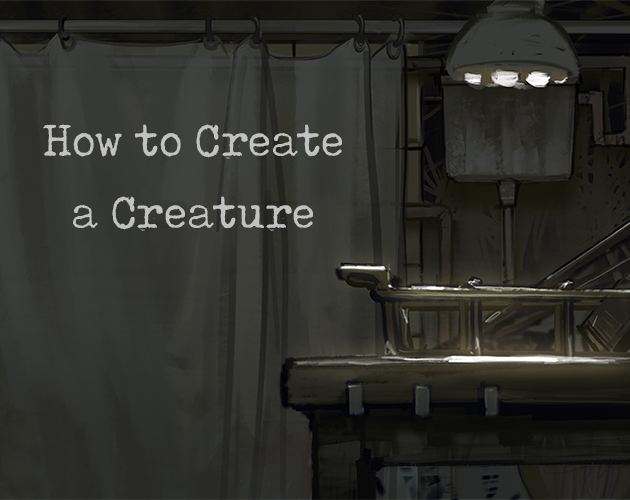
<style>
.page{position:relative;width:630px;height:500px}
.page>*{position:absolute;margin:0}
.t1{font:50px/72px "ToxTypewriter";color:#c2c2c2}
</style>
<div class="page">
<p class="t1" style="left:43px;top:124px;width:299px;height:107px;text-align:center">How to Create a Creature</p>
</div>
